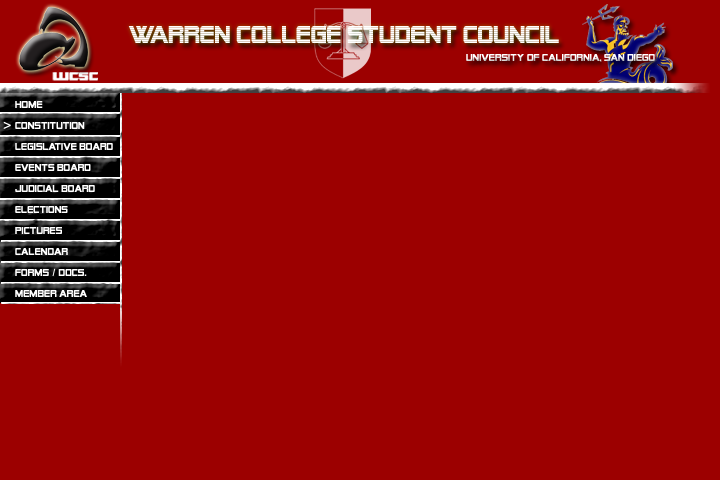
<style>
.page{position:relative;width:720px;height:480px;background:#9c0000}
.page>*{position:absolute;margin:0}
.t1{font:24px "AlienEncountersBold";color:#ffffff}
.t2{font:10px "AlienEncountersSolid";color:#ffffff}
.t3{font:10px/21px "AlienEncountersSolid";color:#ffffff}
.t4{font:10px/21px "Arial-Black";color:#ffffff}
.t5{font:14px "BookAntiqua-Bold";color:#ffffff}
</style>
<div class="page">
<p class="t1" style="left:128px;top:26px;width:431px;height:17px">Warren College Student Council</p>
<p class="t2" style="left:466px;top:54px;width:189px;height:8px">University of California, San Diego</p>
<p class="t3" style="left:15px;top:101px;width:98px;height:196px">Home<br>Constitution<br>Legislative Board<br>Events Board<br>Judicial Board<br>Elections<br>Pictures<br>Calendar<br>Forms<span class="t4"> / </span>Docs.<br>Member Area</p>
<p class="t5" style="left:3px;top:121px;width:8px;height:8px">&gt;</p>
</div>
